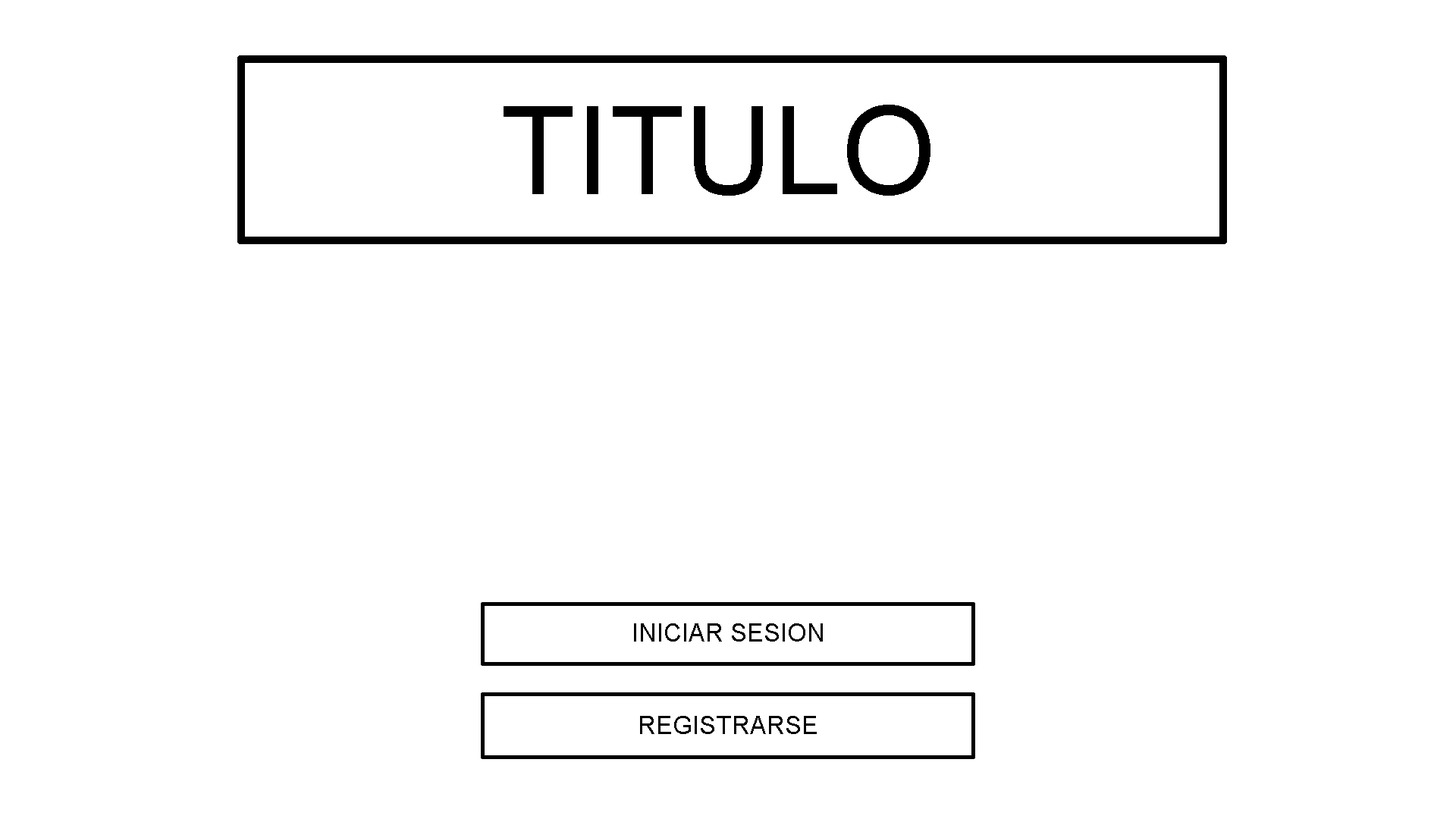
<style>
.page{position:relative;width:1456px;height:819px;background:#ffffff}
.page>*{position:absolute;margin:0}
.t1{font:123.1px "ArialMT";color:#000000}
.t2{font:25px "ArialMT";color:#010101}
</style>
<div class="page">
<p class="t1" style="left:504px;top:105px;width:426px;height:91px">TITULO</p>
<p class="t2" style="left:634px;top:623px;width:189px;height:19px">INICIAR SESION</p>
<p class="t2" style="left:640px;top:716px;width:177px;height:18px">REGISTRARSE</p>
</div>
